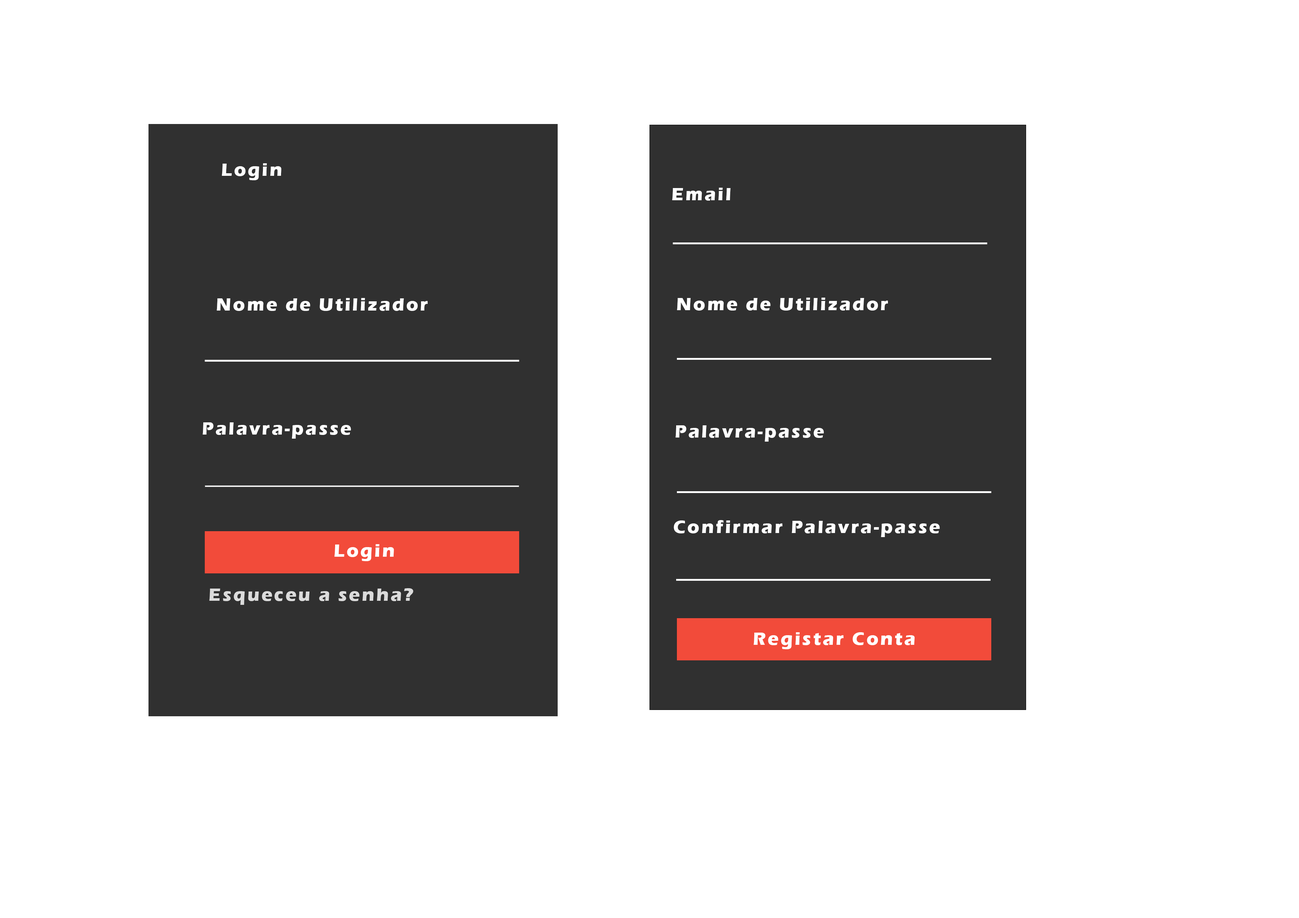
<style>
.page{position:relative;width:1299px;height:918px;background:#ffffff}
.page>*{position:absolute;margin:0}
.t1{font:18.5px "ErasITC-Bold";letter-spacing:0.1em;color:#ffffff}
.t2{font:18.5px "ErasITC-Bold";letter-spacing:0.1em;color:#dbdbdb}
</style>
<div class="page">
<p class="t1" style="left:222px;top:163px;width:59px;height:17px">Login</p>
<p class="t1" style="left:672px;top:188px;width:58px;height:13px">Email</p>
<p class="t1" style="left:217px;top:298px;width:211px;height:13px">Nome de Utilizador</p>
<p class="t1" style="left:677px;top:298px;width:211px;height:13px">Nome de Utilizador</p>
<p class="t1" style="left:203px;top:422px;width:148px;height:17px">Palavra-passe</p>
<p class="t1" style="left:675px;top:425px;width:149px;height:17px">Palavra-passe</p>
<p class="t1" style="left:673px;top:520px;width:267px;height:17px">Confirmar Palavra-passe</p>
<p class="t1" style="left:334px;top:544px;width:60px;height:17px">Login</p>
<p class="t2" style="left:209px;top:588px;width:204px;height:17px">Esqueceu a senha?</p>
<p class="t1" style="left:753px;top:632px;width:161px;height:17px">Registar Conta</p>
</div>
